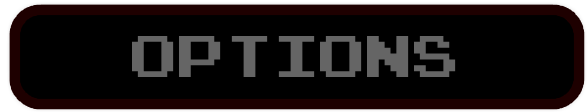
<style>
.page{position:relative;width:588px;height:112px;background:#000000}
.page>*{position:absolute;margin:0}
.t1{font:47px "Super-Mario-Bros.-NES";color:#656565}
</style>
<div class="page">
<p class="t1" style="left:132px;top:35px;width:324px;height:42px">OPTIONS</p>
</div>
